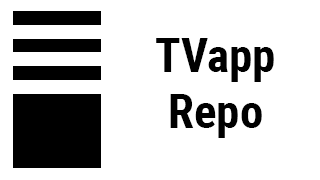
<style>
.page{position:relative;width:320px;height:180px;background:#ffffff}
.page>*{position:absolute;margin:0}
.t1{font:47px "RobotoCondensed-Bold";color:#000000}
</style>
<div class="page">
<p class="t1" style="left:156px;top:38px;width:118px;height:100px;text-align:center">TVapp Repo</p>
</div>
